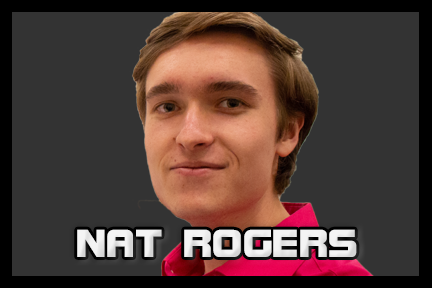
<style>
.page{position:relative;width:432px;height:288px;background:#333333}
.page>*{position:absolute;margin:0}
.t1{font:41.7px "BolsterBold";color:#f3f3f3}
</style>
<div class="page">
<p class="t1" style="left:77px;top:229px;width:280px;height:28px">NAT ROGERS</p>
</div>
